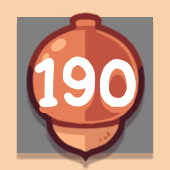
<style>
.page{position:relative;width:170px;height:170px;background:#f9d1ab}
.page>*{position:absolute;margin:0}
.t1{font:100px "Clink-Regular";color:#ffffff}
</style>
<div class="page">
<p class="t1" style="left:34px;top:56px;width:102px;height:52px">190</p>
</div>
